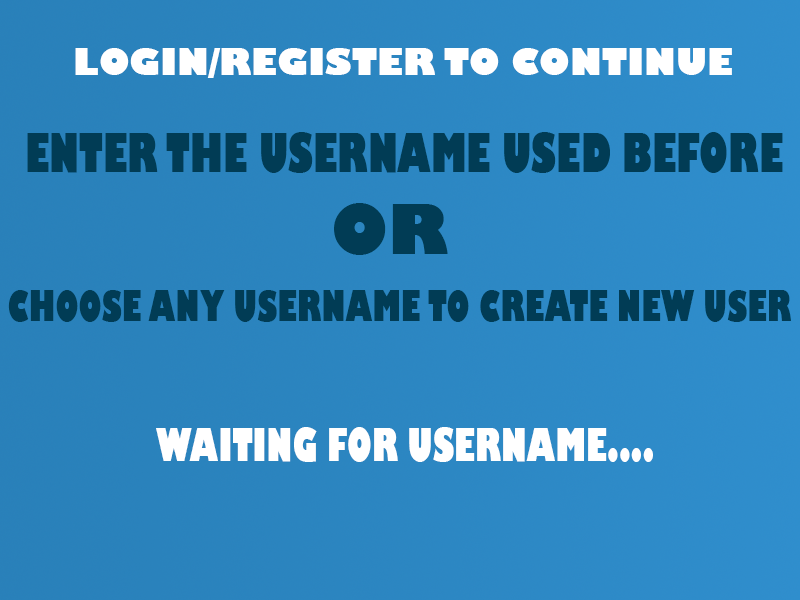
<style>
.page{position:relative;width:800px;height:600px}
.page>*{position:absolute;margin:0}
.t1{font:36px "GillSans-UltraBold";color:#ffffff}
.t2{font:53.4px "GillSans-UltraBold";color:#013c55;scale:0.64 1}
.t3{font:67px "GillSans-UltraBold";color:#013c55}
.t4{font:40.8px "GillSans-UltraBold";color:#013c55;scale:0.67 1}
.t5{font:44px "GillSans-UltraBold";color:#ffffff;scale:0.66 1}
</style>
<div class="page">
<p class="t1" style="left:75px;top:48px;width:657px;height:30px">LOGIN/REGISTER TO CONTINUE</p>
<p class="t2" style="left:27px;top:132px;width:756px;height:41px">ENTER THE USERNAME USED BEFORE</p>
<p class="t3" style="left:334px;top:203px;width:114px;height:52px">OR</p>
<p class="t4" style="left:8px;top:290px;width:783px;height:32px">CHOOSE ANY USERNAME TO CREATE NEW USER</p>
<p class="t5" style="left:156px;top:427px;width:497px;height:35px">WAITING FOR USERNAME....</p>
</div>
